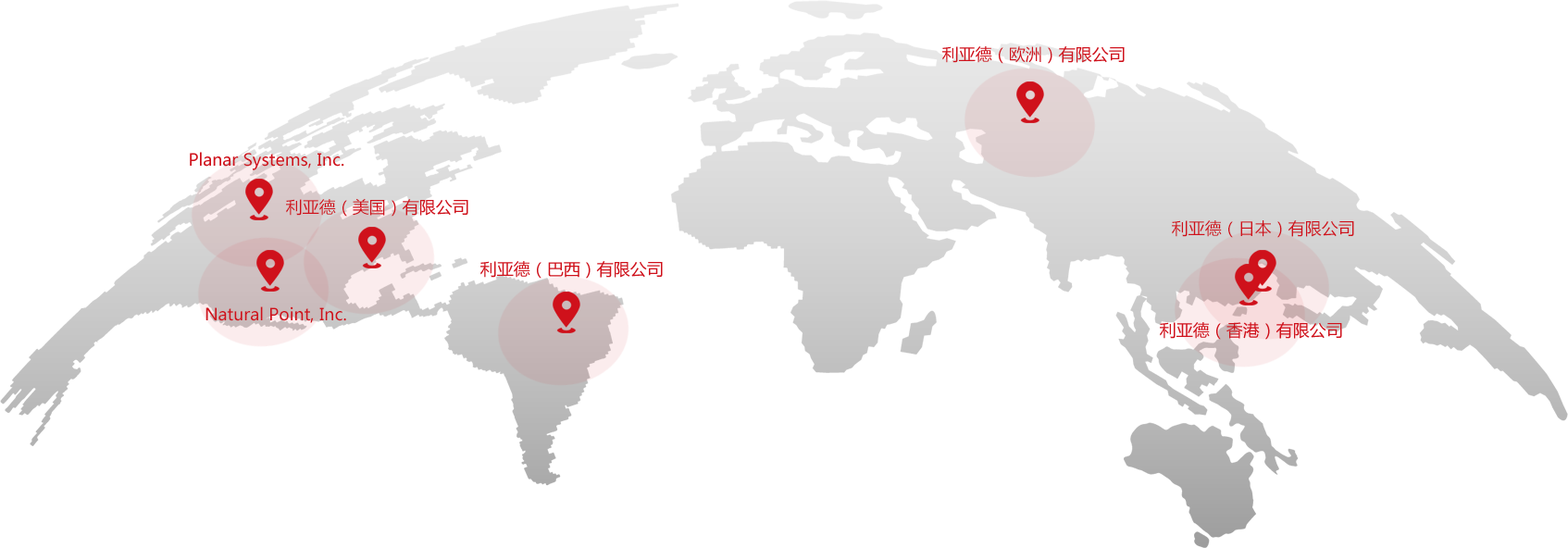
<style>
.page{position:relative;width:1568px;height:548px;background:#ffffff}
.page>*{position:absolute;margin:0}
.t1{font:16.7px "MicrosoftYaHei";color:#cf111b}
</style>
<div class="page">
<p class="t1" style="left:942px;top:46px;width:183px;height:18px">利亚德（欧洲）有限公司</p>
<p class="t1" style="left:190px;top:152px;width:154px;height:18px">Planar Systems, Inc.</p>
<p class="t1" style="left:286px;top:198px;width:182px;height:19px">利亚德（美国）有限公司</p>
<p class="t1" style="left:1172px;top:220px;width:182px;height:18px">利亚德（日本）有限公司</p>
<p class="t1" style="left:480px;top:261px;width:183px;height:18px">利亚德（巴西）有限公司</p>
<p class="t1" style="left:205px;top:306px;width:141px;height:17px">Natural Point, Inc.</p>
<p class="t1" style="left:1160px;top:322px;width:182px;height:18px">利亚德（香港）有限公司</p>
</div>
